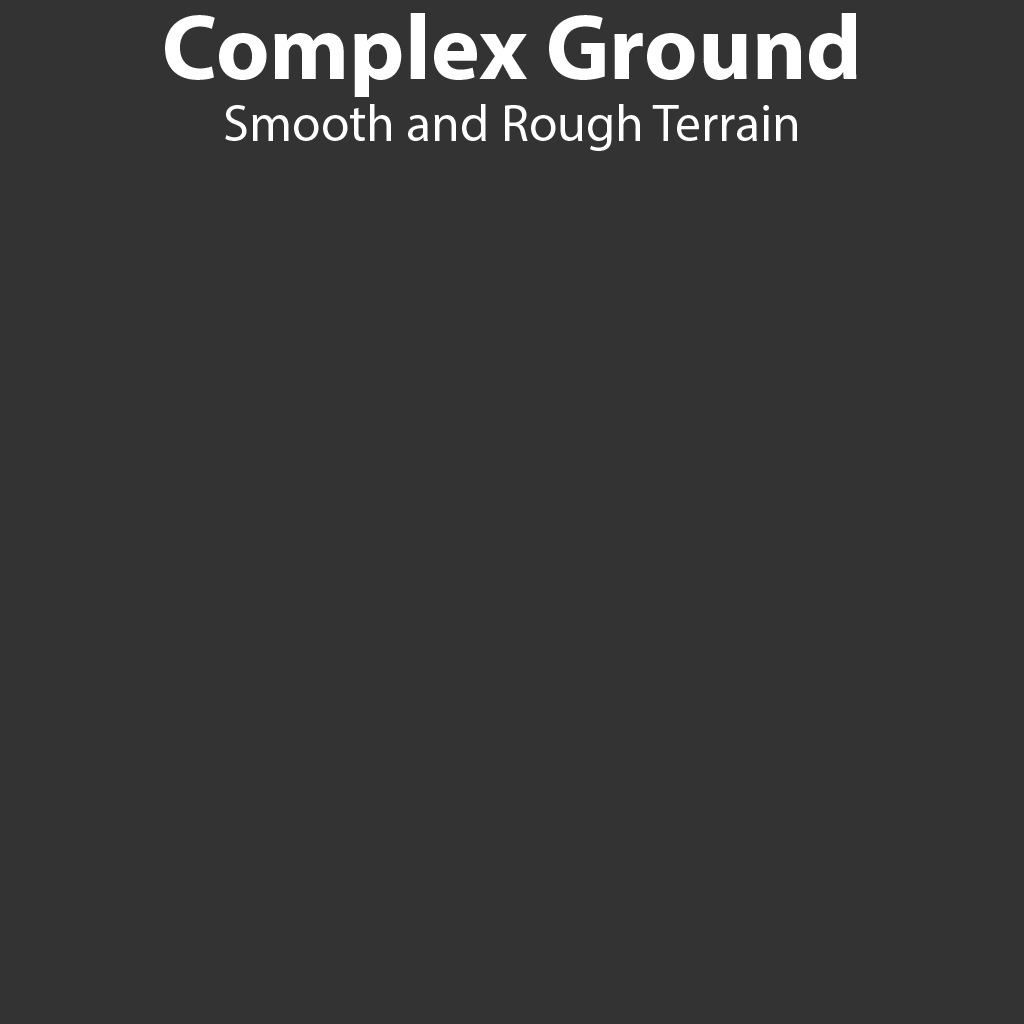
<style>
.page{position:relative;width:1024px;height:1024px;background:#333333}
.page>*{position:absolute;margin:0}
.t1{font:52px "MyriadPro-Regular";color:#ffffff}
.t2{font:93px "MyriadPro-Bold";color:#ffffff}
</style>
<div class="page">
<p class="t1" style="left:165px;top:13px;width:692px;height:138px;text-align:center"><span class="t2">Complex Ground<br></span>Smooth and Rough Terrain</p>
</div>
